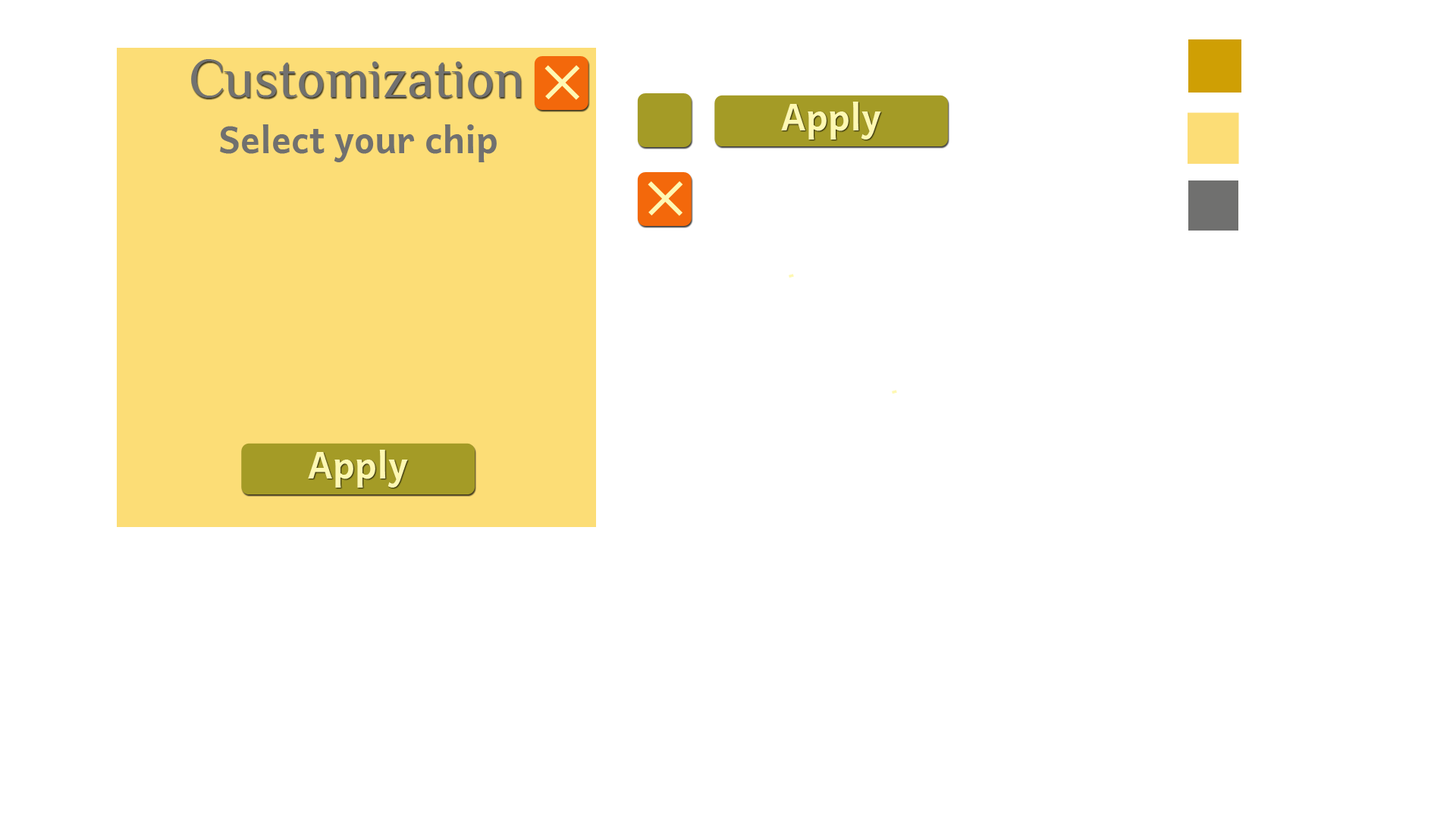
<style>
.page{position:relative;width:1456px;height:819px;background:#ffffff}
.page>*{position:absolute;margin:0}
.t1{font:54.6px "Philosopher-Regular";color:#70706f}
.t2{font:36.4px "Andika-Bold";color:#fef8b3}
.t3{font:36.4px "Andika-Bold";color:#70706f}
</style>
<div class="page">
<p class="t1" style="left:191px;top:59px;width:330px;height:39px">Customization</p>
<p class="t2" style="left:781px;top:102px;width:100px;height:38px">Apply</p>
<p class="t3" style="left:220px;top:124px;width:277px;height:38px">Select your chip</p>
<p class="t2" style="left:308px;top:450px;width:100px;height:38px">Apply</p>
</div>
